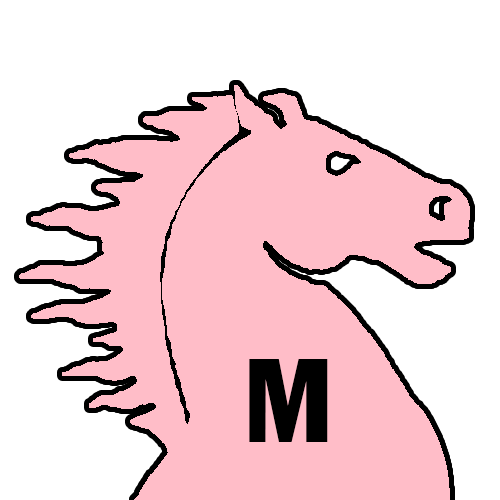
<style>
.page{position:relative;width:500px;height:500px;background:#ffffff}
.page>*{position:absolute;margin:0}
.t1{font:116.7px "VNI-Franko";color:#000000}
</style>
<div class="page">
<p class="t1" style="left:249px;top:359px;width:79px;height:83px">M</p>
</div>
